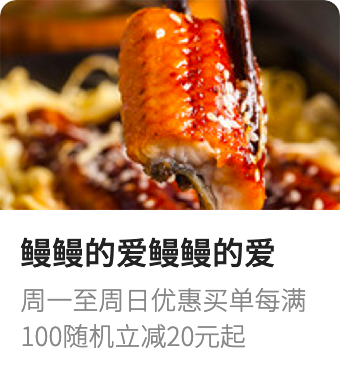
<style>
.page{position:relative;width:340px;height:385px;background:#ffffff}
.page>*{position:absolute;margin:0}
.t1{font:32px "SourceHanSansCN-Medium";color:#222222}
.t2{font:26px/36px "SourceHanSansCN-Light";color:#888888}
</style>
<div class="page">
<p class="t1" style="left:20px;top:237px;width:254px;height:31px">鳗鳗的爱鳗鳗的爱</p>
<p class="t2" style="left:21px;top:287px;width:285px;height:61px">周一至周日优惠买单每满<br>100随机立减20元起</p>
</div>
